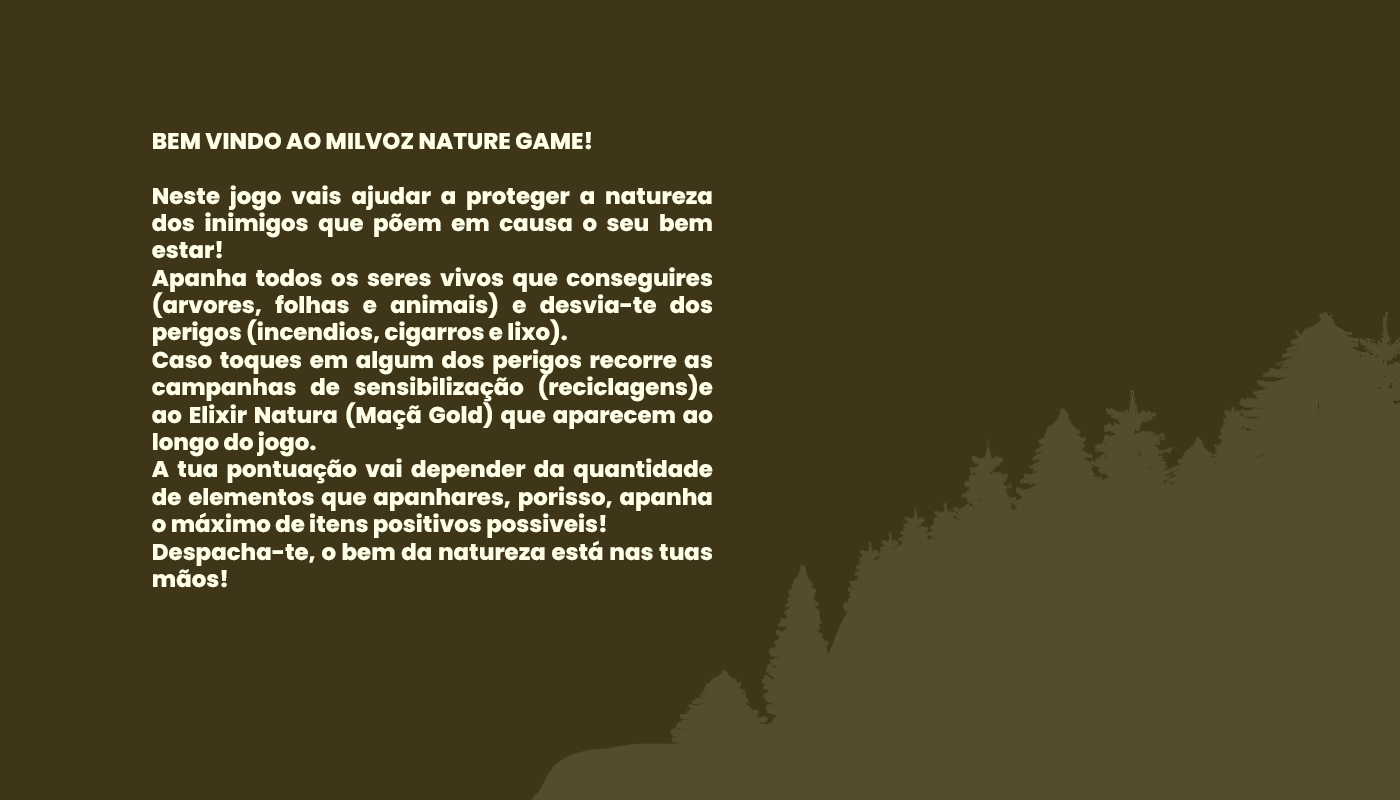
<style>
.page{position:relative;width:1400px;height:800px;background:#3f3619}
.page>*{position:absolute;margin:0}
.t1{font:22.8px "Poppins-ExtraBold";color:#fffee7}
</style>
<div class="page">
<p class="t1" style="left:152px;top:132px;width:561px;height:456px;text-align:justify">BEM VINDO AO MILVOZ NATURE GAME!<br><br>Neste jogo vais ajudar a proteger a natureza dos inimigos que põem em causa o seu bem estar! <br>Apanha todos os seres vivos que conseguires (arvores, folhas e animais) e desvia-te dos perigos (incendios, cigarros e lixo).<br>Caso toques em algum dos perigos recorre as campanhas de sensibilização (reciclagens)e ao Elixir Natura (Maçã Gold) que aparecem ao longo do jogo.<br>A tua pontuação vai depender da quantidade de elementos que apanhares, porisso, apanha o máximo de itens positivos possiveis!<br>Despacha-te, o bem da natureza está nas tuas mãos!</p>
</div>
